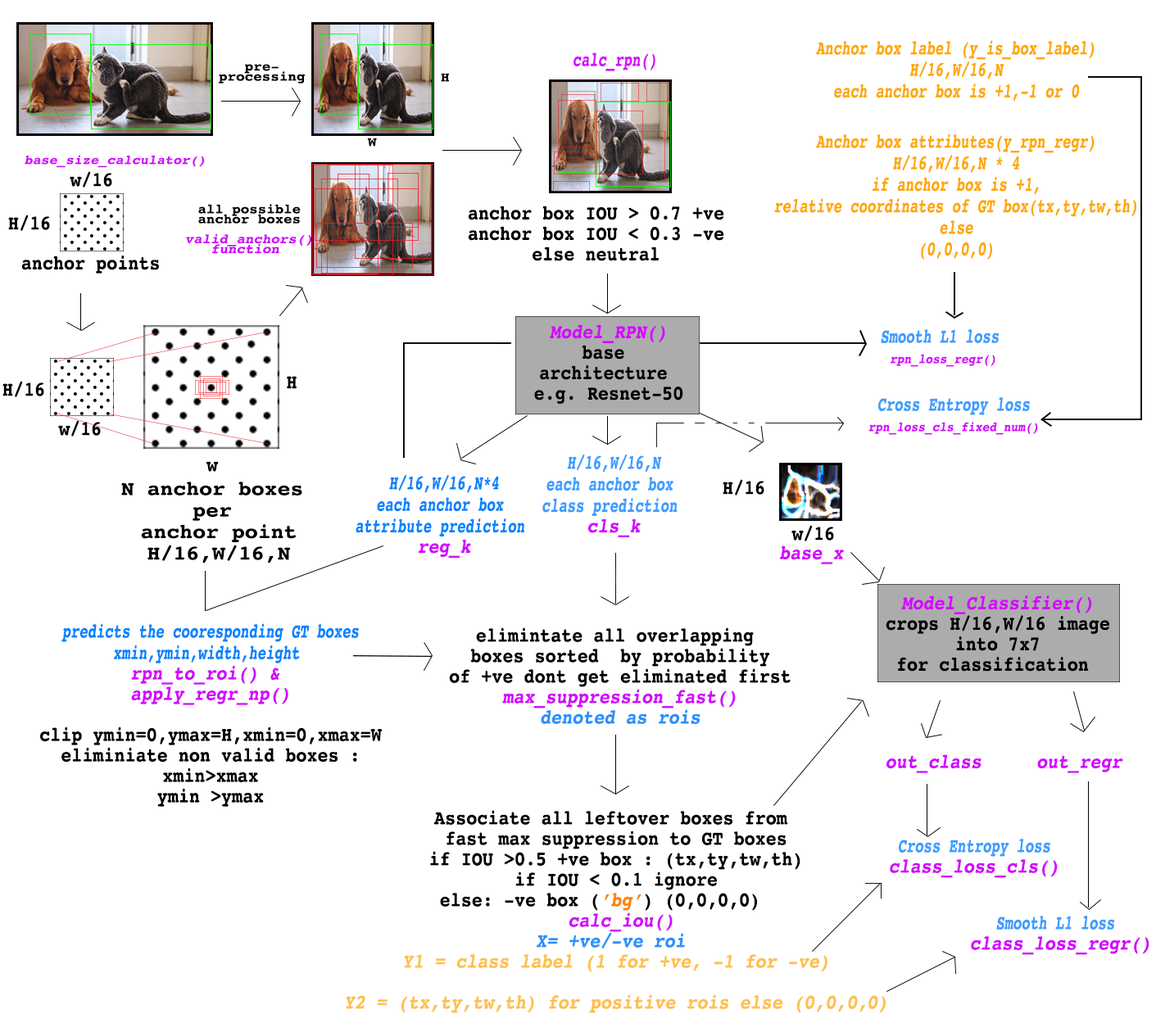
<style>
.page{position:relative;width:1156px;height:1032px;background:#ffffff}
.page>*{position:absolute;margin:0}
.t1{font:20.5px/21.5px "Courier-Bold";color:#ffa800;font-style:italic;scale:0.69 1}
.t2{font:20.5px "Courier-Bold";color:#d511ff;font-style:italic;scale:0.69 1}
.t3{font:13.6px/10px "Courier-Bold";color:#000000;scale:1.06 1}
.t4{font:13.5px "Courier-Bold";color:#000000;scale:1.06 1}
.t5{font:13px "Courier-Bold";color:#d409ff;font-style:italic;scale:1.06 1}
.t6{font:20.5px "Courier-Bold";color:#000000;scale:0.87 1}
.t7{font:13.5px/10px "Courier-Bold";color:#000000;scale:1.06 1}
.t8{font:13.5px/10px "Courier-Bold";color:#d409ff;font-style:italic;scale:1.06 1}
.t9{font:20.5px/20.5px "Courier-Bold";color:#000000;scale:0.87 1}
.t10{font:20.5px/20.5px "Courier-Bold";color:#d409ff;font-style:italic;scale:0.87 1}
.t11{font:13.6px/20.5px "Courier-Bold";color:#d409ff;font-style:italic;scale:0.87 1}
.t12{font:20.5px/21.5px "Courier-Bold";color:#3e9eff;font-style:italic;scale:0.69 1}
.t13{font:20.5px/21.5px "Courier-Bold";color:#000000;scale:1.06 1}
.t14{font:20.5px/21.5px "Courier-Bold";color:#0084ff;font-style:italic;scale:0.69 1}
.t15{font:20.5px "Courier-Bold";color:#d409ff;font-style:italic;scale:0.87 1}
.t16{font:20.5px/20.5px "Courier-Bold";color:#2b91fa;font-style:italic;scale:0.87 1}
.t17{font:20.5px/20.5px "Courier-Bold";color:#ff8400;font-style:italic;scale:0.87 1}
.t18{font:20.5px/20.5px "Courier-Bold";color:#ffc04f;font-style:italic;scale:0.87 1}
</style>
<div class="page">
<p class="t1" style="left:816px;top:40px;width:278px;height:61px;text-align:center">Anchor box label (y_is_box_label)<br>H/16,W/16,N<br>each anchor box is +1,-1 or 0</p>
<p class="t2" style="left:573px;top:52px;width:82px;height:19px">calc_rpn()</p>
<p class="t3" style="left:218px;top:64px;width:87px;height:20px;text-align:center">pre-<br>processing</p>
<p class="t4" style="left:441px;top:73px;width:8px;height:9px">H</p>
<p class="t4" style="left:367px;top:138px;width:10px;height:9px">W</p>
<p class="t1" style="left:774px;top:133px;width:362px;height:127px;text-align:center">Anchor box attributes(y_rpn_regr)<br>H/16,W/16,N * 4<br>if anchor box is +1,<br>relative coordinates of GT box(tx,ty,tw,th)<br>else<br>(0,0,0,0)</p>
<p class="t5" style="left:25px;top:155px;width:180px;height:13px">base_size_calculator()</p>
<p class="t6" style="left:70px;top:171px;width:42px;height:17px">w/16</p>
<p class="t7" style="left:186px;top:204px;width:126px;height:50px;text-align:center">all possible<br>anchor boxes<br><br><span class="t8">valid_anchors()<br>function</span></p>
<p class="t9" style="left:468px;top:206px;width:256px;height:55px;text-align:center">anchor box IOU &gt; 0.7 +ve<br>anchor box IOU &lt; 0.3 -ve<br>else neutral</p>
<p class="t6" style="left:8px;top:215px;width:42px;height:16px">H/16</p>
<p class="t6" style="left:21px;top:256px;width:138px;height:18px">anchor points</p>
<p class="t9" style="left:534px;top:324px;width:149px;height:80px;text-align:center"><span class="t10">Model_RPN()<br></span>base <br>architecture <br>e.g. Resnet-50</p>
<p class="t11" style="left:880px;top:329px;width:118px;height:38px;text-align:center"><span class="t12">Smooth L1 loss<br></span> rpn_loss_regr()</p>
<p class="t6" style="left:287px;top:376px;width:9px;height:13px">H</p>
<p class="t6" style="left:2px;top:381px;width:42px;height:16px">H/16</p>
<p class="t11" style="left:868px;top:397px;width:170px;height:38px;text-align:center"><span class="t12">Cross Entropy loss<br></span>rpn_loss_cls_fixed_num()</p>
<p class="t6" style="left:58px;top:420px;width:43px;height:17px">w/16</p>
<p class="t6" style="left:206px;top:461px;width:13px;height:11px">w</p>
<p class="t12" style="left:542px;top:454px;width:135px;height:83px;text-align:center">H/16,W/16,N<br>each anchor box <br>class prediction <br><span class="t10">cls_k</span></p>
<p class="t13" style="left:121px;top:482px;width:181px;height:81px;text-align:center">N anchor boxes <br>per <br>anchor point<br>H/16,W/16,N</p>
<p class="t14" style="left:355px;top:474px;width:169px;height:84px;text-align:center">H/16,W/16,N*4<br>each anchor box <br>attribute prediction <br><span class="t10">reg_k</span></p>
<p class="t6" style="left:722px;top:479px;width:42px;height:16px">H/16</p>
<p class="t6" style="left:791px;top:525px;width:43px;height:16px">w/16</p>
<p class="t15" style="left:780px;top:545px;width:64px;height:19px">base_x</p>
<p class="t9" style="left:885px;top:595px;width:224px;height:77px;text-align:center"><span class="t10">Model_Classifier()<br></span>crops H/16,W/16 image<br>into 7x7<br>for classification</p>
<p class="t9" style="left:40px;top:623px;width:342px;height:184px;text-align:center"><span class="t14">predicts the cooresponding GT boxes<br>xmin,ymin,width,height <br></span><span class="t10">rpn_to_roi() &amp; <br>apply_regr_np()<br><br></span>clip ymin=0,ymax=H,xmin=0,xmax=W<br>eliminiate non valid boxes :<br>xmin&gt;xmax<br>ymin &gt;ymax</p>
<p class="t9" style="left:449px;top:627px;width:341px;height:97px;text-align:center">elimintate all overlapping <br>boxes sorted  by probability<br>of +ve dont get eliminated first<br><span class="t10">max_suppression_fast()<br></span><span class="t16">denoted as rois</span></p>
<p class="t15" style="left:886px;top:754px;width:95px;height:19px">out_class</p>
<p class="t15" style="left:1037px;top:755px;width:86px;height:18px">out_regr</p>
<p class="t9" style="left:346px;top:810px;width:539px;height:203px;text-align:center">Associate all leftover boxes from <br>fast max suppression to GT boxes<br>if IOU &gt;0.5 +ve box : (tx,ty,tw,th)<br>if IOU &lt; 0.1 ignore<br>else: -ve box (<span class="t17">’bg’</span>) (0,0,0,0)   <br><span class="t10"> calc_iou()<br></span><span class="t16">X= +ve/-ve roi <br></span><span class="t18">Y1 = class label (1 for +ve, -1 for -ve)<br><br>Y2 = (tx,ty,tw,th) for positive rois else (0,0,0,0)</span></p>
<p class="t12" style="left:889px;top:839px;width:168px;height:39px;text-align:center">Cross Entropy loss<br><span class="t10">class_loss_cls()</span></p>
<p class="t10" style="left:970px;top:916px;width:179px;height:39px;text-align:center"><span class="t12">Smooth L1 loss<br></span> class_loss_regr()</p>
</div>
